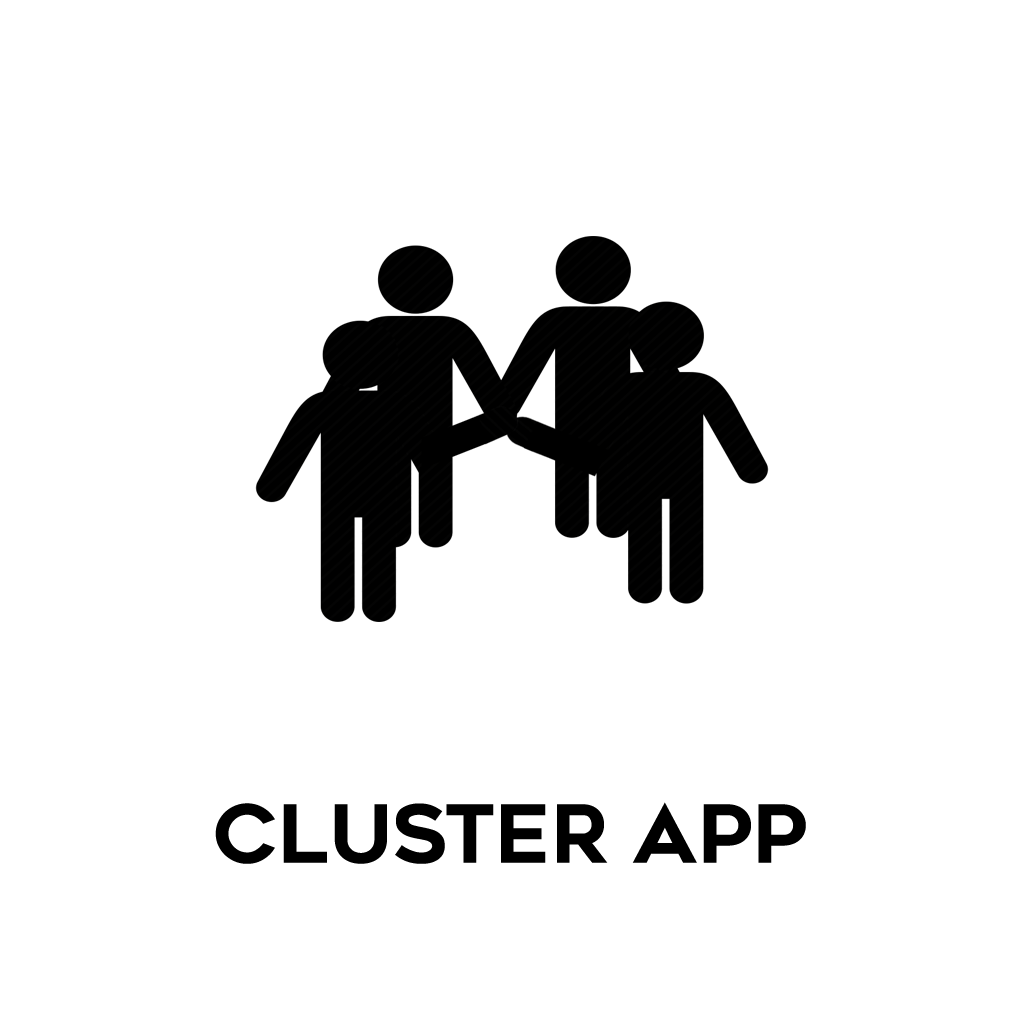
<style>
.page{position:relative;width:1024px;height:1024px;background:#ffffff}
.page>*{position:absolute;margin:0}
.t1{font:80px "Renogare-Regular";color:#000000}
</style>
<div class="page">
<p class="t1" style="left:215px;top:802px;width:591px;height:62px">CLUSTER APP</p>
</div>
